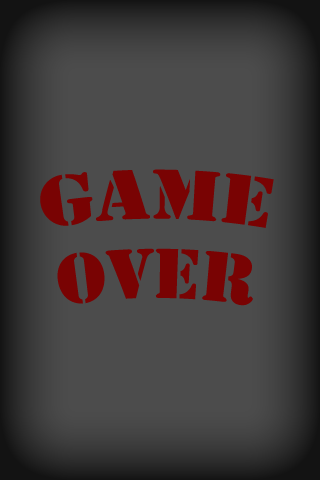
<style>
.page{position:relative;width:320px;height:480px;background:#4c4c4c}
.page>*{position:absolute;margin:0}
.t1{font:66px "StencilStd";color:#790303}
</style>
<div class="page">
<p class="t1" style="left:40px;top:169px;width:234px;height:137px;text-align:center">Game<br>over</p>
</div>
